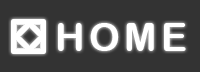
<style>
.page{position:relative;width:200px;height:72px;background:#333333}
.page>*{position:absolute;margin:0}
.t1{font:39.3px "ArialRoundedMTBold";letter-spacing:0.1em;color:#ffffff}
</style>
<div class="page">
<p class="t1" style="left:58px;top:23px;width:128px;height:28px">HOME</p>
</div>
